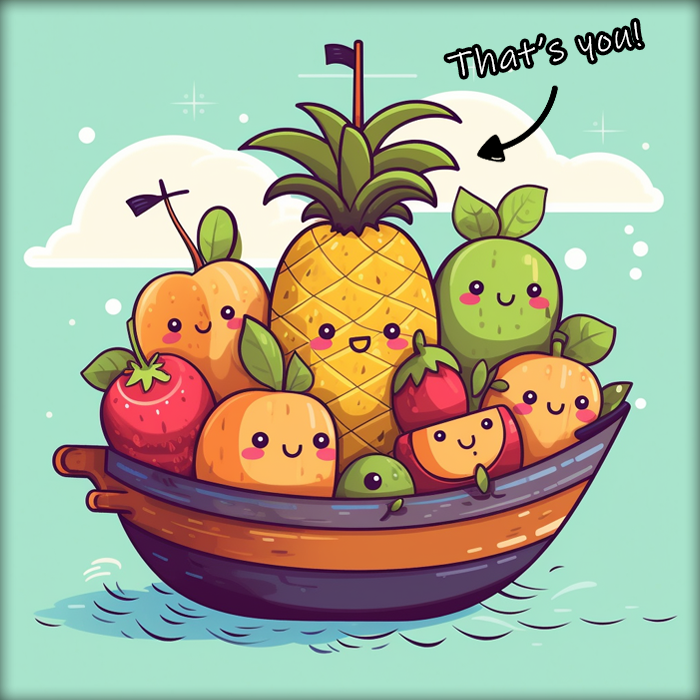
<style>
.page{position:relative;width:700px;height:700px}
.page>*{position:absolute;margin:0}
.t1{font:35.9px "InkFree";letter-spacing:0.06em;color:#ffffff}
</style>
<div class="page">
<p class="t1" style="left:447px;top:21px;width:195px;height:55px;rotate:-10deg">That’s you!</p>
</div>
